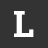
<style>
.page{position:relative;width:48px;height:48px;background:#333333}
.page>*{position:absolute;margin:0}
.t1{font:36px "RobotoSlab-Bold";letter-spacing:0.001em;color:#ffffff}
</style>
<div class="page">
<p class="t1" style="left:14px;top:11px;width:20px;height:26px">L</p>
</div>
